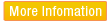
<style>
.page{position:relative;width:110px;height:22px;background:#ffffff}
.page>*{position:absolute;margin:0}
.t1{font:14px "HelveticaNeueLTStd-Cn";letter-spacing:0.04em;color:#ffffff}
</style>
<div class="page">
<p class="t1" style="left:10px;top:5px;width:92px;height:11px">More Infomation</p>
</div>
